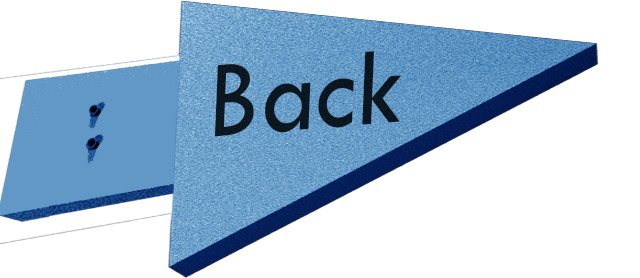
<style>
.page{position:relative;width:640px;height:278px;background:#ffffff}
.page>*{position:absolute;margin:0}
.t1{font:114.7px "TwCenMT-Regular";color:#000000;scale:0.9 1}
</style>
<div class="page">
<p class="t1" style="left:214px;top:51px;width:188px;height:86px;rotate:-5deg;opacity:0.92">Back</p>
</div>
